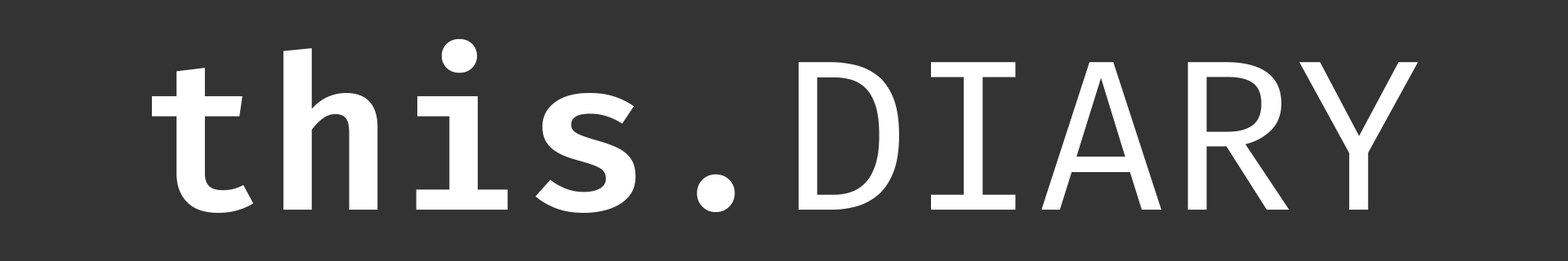
<style>
.page{position:relative;width:1568px;height:261px;background:#333333}
.page>*{position:absolute;margin:0}
.t1{font:209.1px "FiraCode-Regular";color:#ffffff}
.t2{font:209.1px "FiraCode-SemiBold";color:#ffffff}
</style>
<div class="page">
<p class="t1" style="left:152px;top:38px;width:1267px;height:175px"><span class="t2">this</span>.DIARY</p>
</div>
